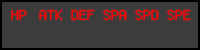
<style>
.page{position:relative;width:200px;height:50px;background:#3c3c3c}
.page>*{position:absolute;margin:0}
.t1{font:15px "Power-Red-and-Green";color:#ff0000;scale:1.07 1}
</style>
<div class="page">
<p class="t1" style="left:11px;top:9px;width:16px;height:12px">HP</p>
<p class="t1" style="left:39px;top:9px;width:24px;height:12px">ATK</p>
<p class="t1" style="left:71px;top:9px;width:24px;height:12px">DEF</p>
<p class="t1" style="left:103px;top:9px;width:24px;height:12px">SPA</p>
<p class="t1" style="left:135px;top:9px;width:24px;height:12px">SPD</p>
<p class="t1" style="left:167px;top:9px;width:24px;height:12px">SPE</p>
</div>
